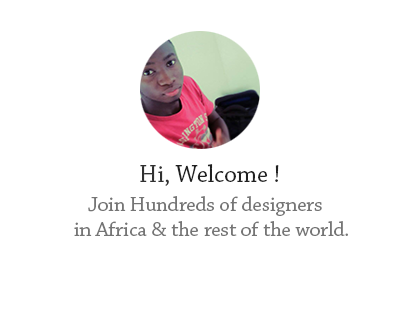
<style>
.page{position:relative;width:400px;height:320px;background:#ffffff}
.page>*{position:absolute;margin:0}
.t1{font:25px "ChaparralPro-Regular";color:#202020}
.t2{font:25px "ChaparralPro-Regular";color:#313131}
.t3{font:20.8px "ChaparralPro-Regular";color:#757575}
</style>
<div class="page">
<p class="t1" style="left:140px;top:164px;width:139px;height:22px"><span class="t2">Hi, </span>Welcome !</p>
<p class="t3" style="left:74px;top:196px;width:274px;height:40px">Join Hundreds of designers <br>in Africa &amp; the rest of the world.</p>
</div>
